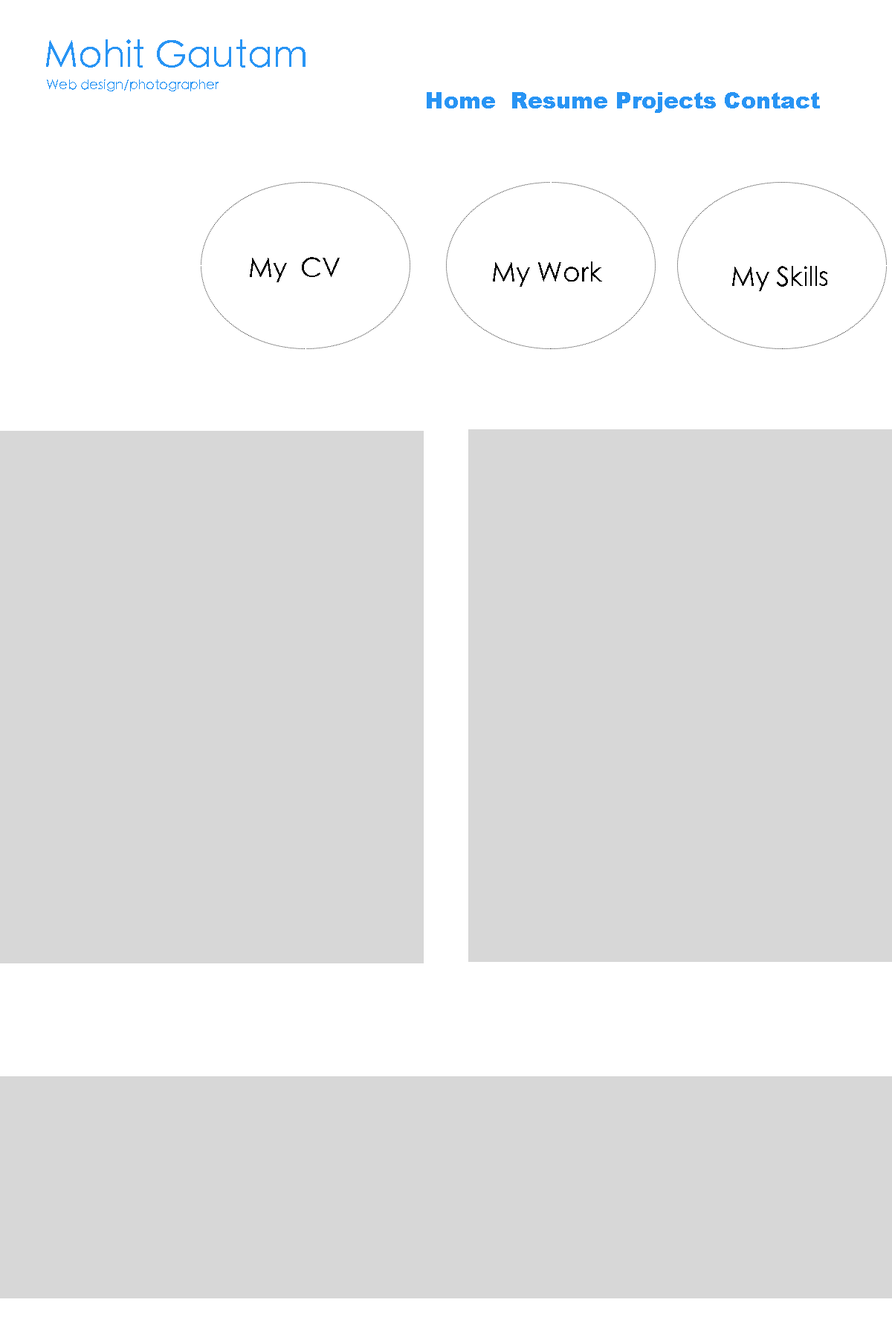
<style>
.page{position:relative;width:892px;height:1337px;background:#d7d7d7}
.page>*{position:absolute;margin:0}
.t1{font:37.2px "STHeitiSC-Light";color:#2894f4}
.t2{font:13.4px "STHeitiSC-Light";color:#2894f4}
.t3{font:22.3px "Arial-Black";color:#2894f4}
.t4{font:26.7px "STHeitiSC-Light";color:#000000}
.t5{font:13.4px "Arial-Black";color:#000000}
</style>
<div class="page">
<p class="t1" style="left:46px;top:39px;width:259px;height:29px">Mohit Gautam</p>
<p class="t2" style="left:47px;top:80px;width:171px;height:11px">Web design/photographer</p>
<p class="t3" style="left:426px;top:92px;width:394px;height:21px">Home  Resume Projects Contact</p>
<p class="t4" style="left:250px;top:257px;width:90px;height:25px"><span class="t5"><br></span> My  CV</p>
<p class="t4" style="left:493px;top:262px;width:109px;height:25px">My Work</p>
<p class="t4" style="left:732px;top:266px;width:95px;height:25px">My Skills</p>
</div>
